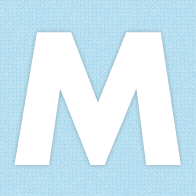
<style>
.page{position:relative;width:196px;height:196px;background:#ffffff}
.page>*{position:absolute;margin:0}
.t1{font:175.8px "FuturaLT-Bold";letter-spacing:0.045em;color:#ffffff;text-transform:uppercase}
</style>
<div class="page">
<p class="t1" style="left:14px;top:32px;width:167px;height:133px">M</p>
</div>
